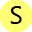
<style>
.page{position:relative;width:32px;height:32px;background:#fffe74}
.page>*{position:absolute;margin:0}
.t1{font:25px "MicrosoftTaiLe";color:#000000}
</style>
<div class="page">
<p class="t1" style="left:10px;top:6px;width:12px;height:18px">S</p>
</div>
